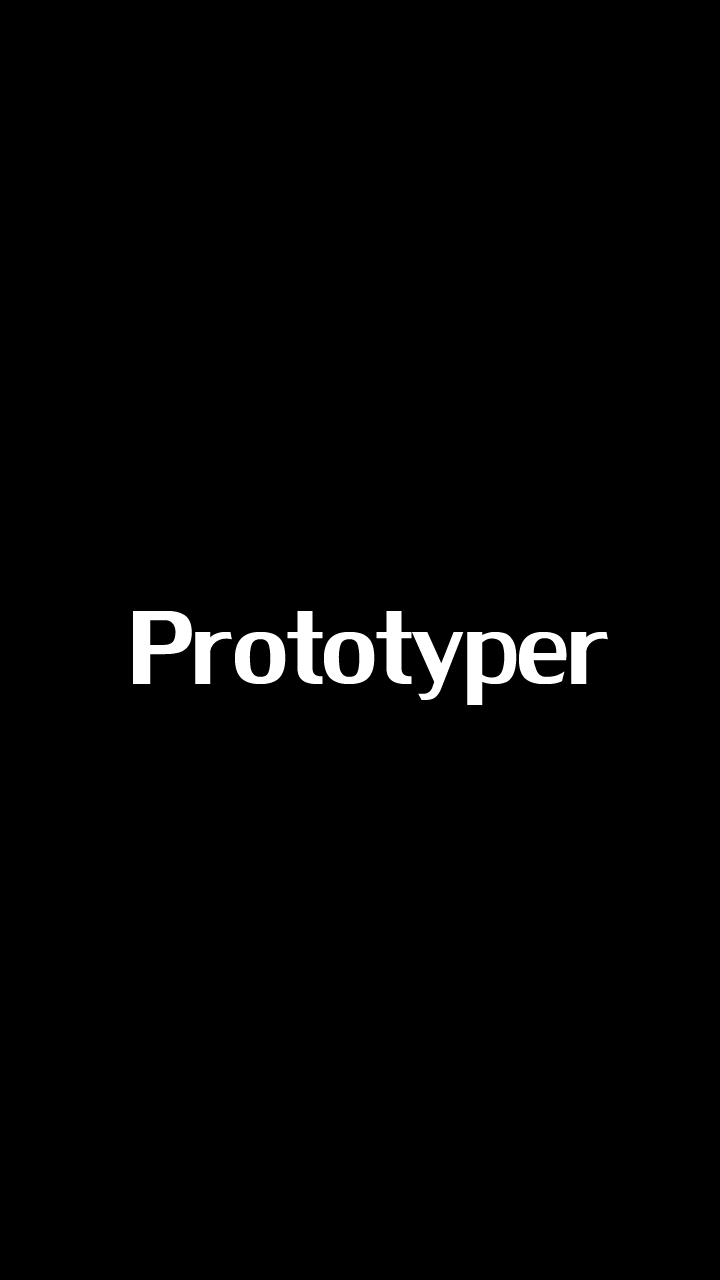
<style>
.page{position:relative;width:720px;height:1280px;background:#000000}
.page>*{position:absolute;margin:0}
.t1{font:158.3px "LilyUPC";color:#ffffff}
</style>
<div class="page">
<p class="t1" style="left:133px;top:611px;width:475px;height:94px">Prototyper</p>
</div>
